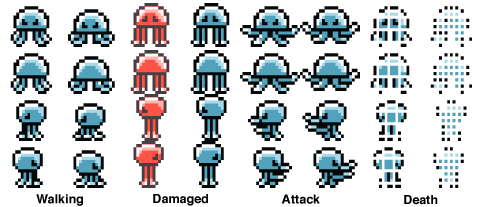
<style>
.page{position:relative;width:480px;height:207px;background:#ffffff}
.page>*{position:absolute;margin:0}
.t1{font:12.5px "Helvetica-Bold";color:#000000}
</style>
<div class="page">
<p class="t1" style="left:36px;top:194px;width:47px;height:12px">Walking</p>
<p class="t1" style="left:153px;top:194px;width:55px;height:12px">Damaged</p>
<p class="t1" style="left:281px;top:194px;width:39px;height:10px">Attack</p>
<p class="t1" style="left:404px;top:195px;width:34px;height:10px">Death</p>
</div>
